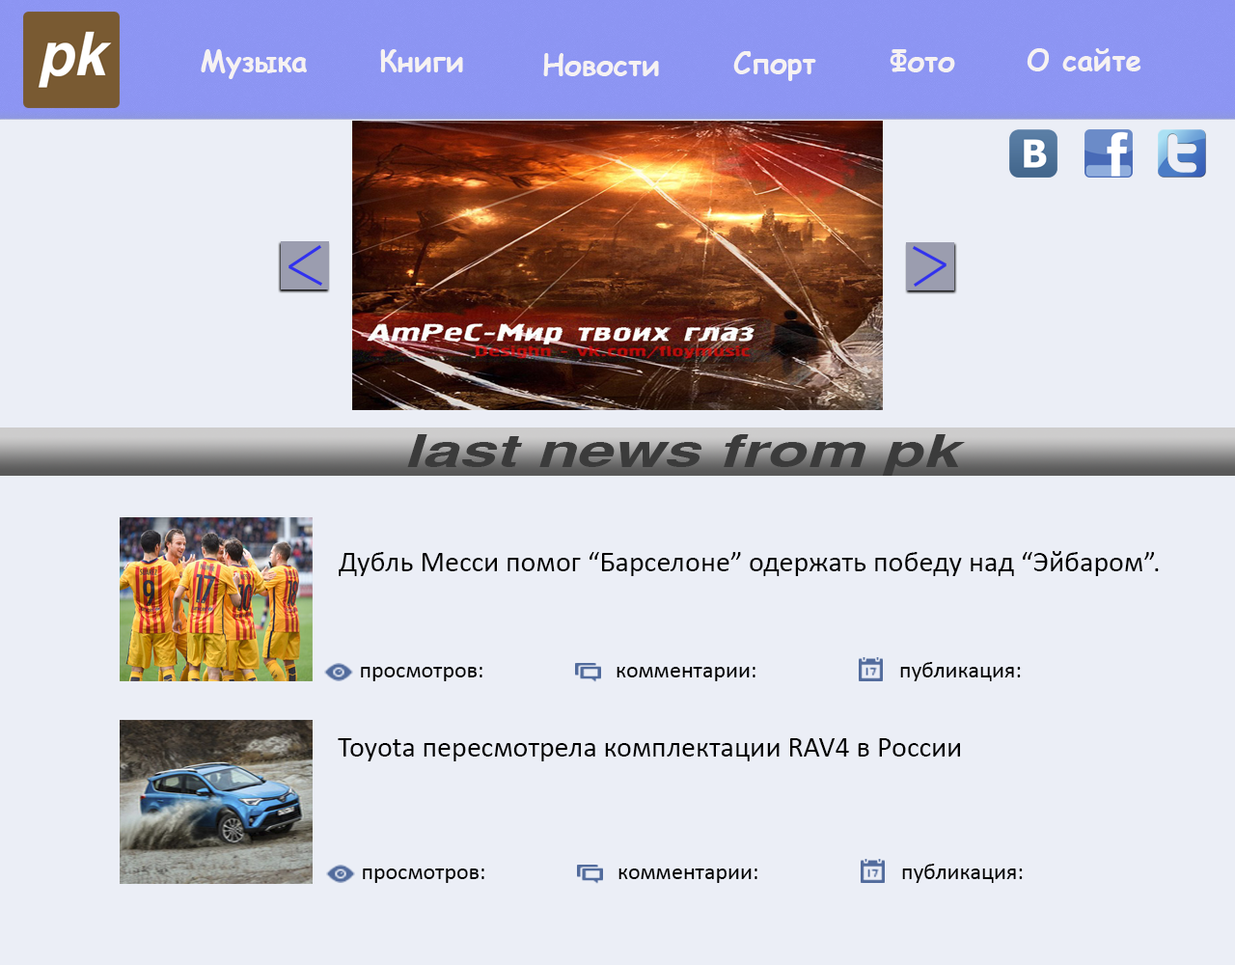
<style>
.page{position:relative;width:1235px;height:965px;background:#ebeef6}
.page>*{position:absolute;margin:0}
.t1{font:29px "ComicSansMS-Bold";color:#f6f2f2}
.t2{font:29px "Calibri";color:#000000}
.t3{font:23.2px "Calibri";color:#000000}
</style>
<div class="page">
<p class="t1" style="left:201px;top:49px;width:106px;height:30px">Музыка</p>
<p class="t1" style="left:380px;top:49px;width:83px;height:23px">Книги</p>
<p class="t1" style="left:543px;top:53px;width:116px;height:23px">Новости</p>
<p class="t1" style="left:734px;top:51px;width:83px;height:30px">Спорт</p>
<p class="t1" style="left:890px;top:49px;width:66px;height:23px">Фото</p>
<p class="t1" style="left:1027px;top:48px;width:115px;height:23px">О сайте</p>
<p class="t2" style="left:339px;top:551px;width:820px;height:25px">Дубль Месси помог “Барселоне” одержать победу над “Эйбаром”.</p>
<p class="t3" style="left:901px;top:662px;width:120px;height:19px">публикация:</p>
<p class="t3" style="left:361px;top:667px;width:122px;height:14px">просмотров:</p>
<p class="t3" style="left:617px;top:667px;width:139px;height:14px">комментарии:</p>
<p class="t2" style="left:338px;top:738px;width:622px;height:24px">Toyota пересмотрела комплектации RAV4 в России</p>
<p class="t3" style="left:363px;top:869px;width:122px;height:14px">просмотров:</p>
<p class="t3" style="left:619px;top:869px;width:139px;height:14px">комментарии:</p>
<p class="t3" style="left:902px;top:864px;width:121px;height:19px">публикация:</p>
</div>
